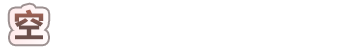
<style>
.page{position:relative;width:360px;height:50px;background:#ffffff}
.page>*{position:absolute;margin:0}
.t1{font:32px "SourceHanSansSC-Bold";color:#77544d;font-weight:bold}
</style>
<div class="page">
<p class="t1" style="left:14px;top:9px;width:30px;height:31px">空</p>
</div>
